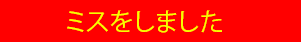
<style>
.page{position:relative;width:301px;height:42px;background:#ff0000}
.page>*{position:absolute;margin:0}
.t1{font:25px "KozGoPr6N-Regular";color:#f6ff00}
</style>
<div class="page">
<p class="t1" style="left:67px;top:10px;width:155px;height:23px">ミスをしました</p>
</div>
